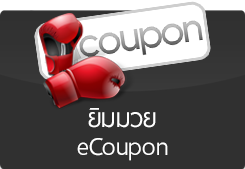
<style>
.page{position:relative;width:245px;height:169px;background:#303030}
.page>*{position:absolute;margin:0}
.t1{font:34px/28px "ThaiSansNeue-Regular";color:#ffffff}
</style>
<div class="page">
<p class="t1" style="left:77px;top:108px;width:91px;height:53px;text-align:center">ยิมมวย<br>eCoupon</p>
</div>
